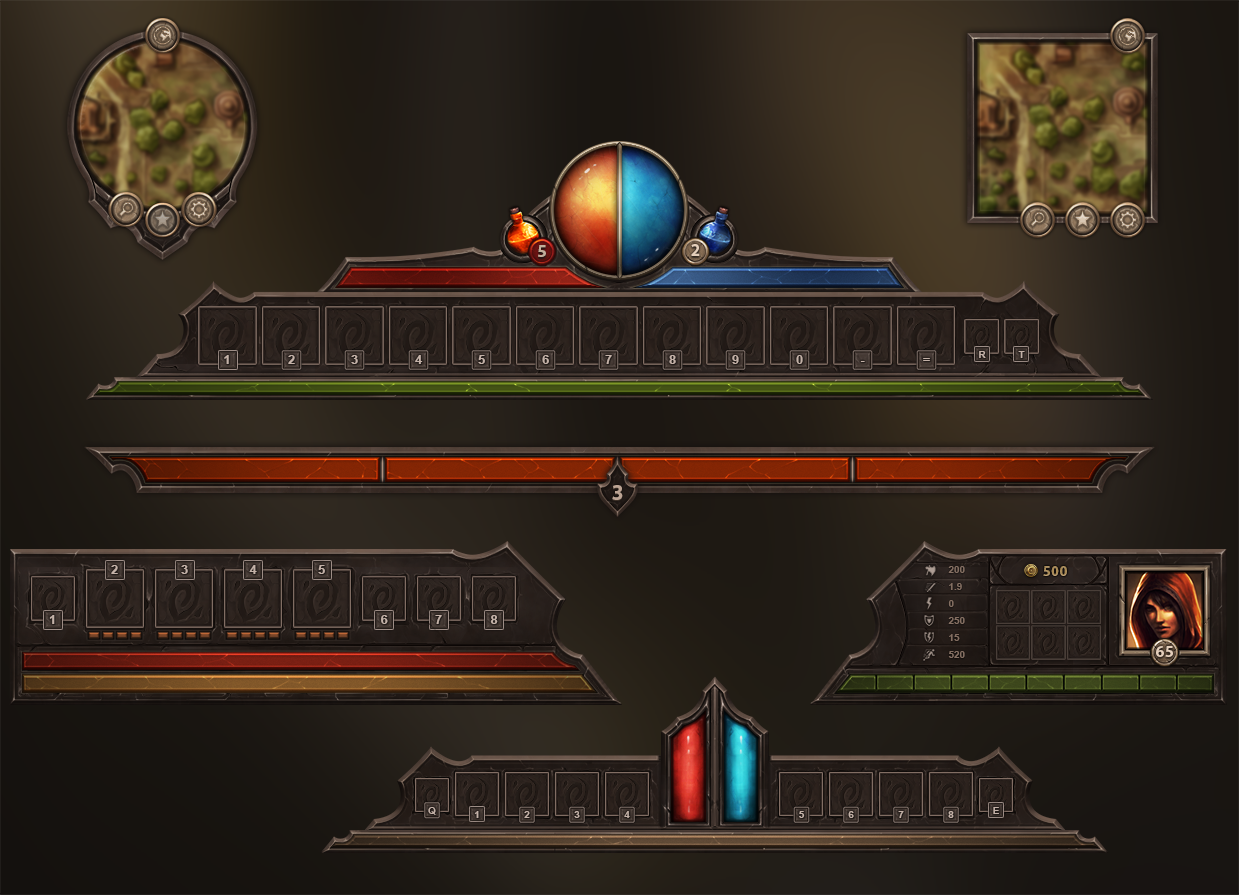
<style>
.page{position:relative;width:1239px;height:895px}
.page>*{position:absolute;margin:0}
.t1{font:17.5px "MyriadPro-Bold";color:#c2af9b}
.t2{font:17.5px "MyriadPro-Bold";color:#e4ceba}
.t3{font:9px "Arial-BoldMT";color:#c4b2a8;text-transform:uppercase;scale:1.11 1}
.t4{font:11.7px "Arial-BoldMT";color:#c4b2a8;text-transform:uppercase;scale:1.11 1}
.t5{font:22px "MyriadPro-Bold";color:#bca494}
.t6{font:9px "Arial-BoldMT";color:#846f62;text-transform:uppercase;scale:1.11 1}
.t7{font:14px "MyriadPro-Bold";letter-spacing:0.05em;color:#a88954}
.t8{font:16.5px "MyriadPro-Bold";color:#e4ceba}
.t9{font:9.3px "Arial-BoldMT";color:#c4b2a8;text-transform:uppercase;scale:1.1 1}
</style>
<div class="page">
<p class="t1" style="left:538px;top:245px;width:8px;height:12px">5</p>
<p class="t2" style="left:691px;top:244px;width:9px;height:12px">2</p>
<p class="t3" style="left:979px;top:351px;width:7px;height:7px">R</p>
<p class="t3" style="left:1018px;top:351px;width:7px;height:7px">t</p>
<p class="t4" style="left:224px;top:355px;width:5px;height:9px">1</p>
<p class="t4" style="left:288px;top:355px;width:7px;height:9px">2</p>
<p class="t4" style="left:351px;top:355px;width:7px;height:9px">3</p>
<p class="t4" style="left:415px;top:355px;width:8px;height:9px">4</p>
<p class="t4" style="left:478px;top:355px;width:7px;height:9px">5</p>
<p class="t4" style="left:542px;top:355px;width:7px;height:9px">6</p>
<p class="t4" style="left:605px;top:355px;width:7px;height:9px">7</p>
<p class="t4" style="left:669px;top:355px;width:7px;height:9px">8</p>
<p class="t4" style="left:732px;top:355px;width:7px;height:9px">9</p>
<p class="t4" style="left:796px;top:355px;width:7px;height:9px">0</p>
<p class="t4" style="left:860px;top:361px;width:5px;height:1px">-</p>
<p class="t4" style="left:923px;top:358px;width:7px;height:3px">=</p>
<p class="t5" style="left:612px;top:485px;width:11px;height:15px">3</p>
<p class="t4" style="left:111px;top:565px;width:7px;height:9px">2</p>
<p class="t4" style="left:181px;top:565px;width:7px;height:9px">3</p>
<p class="t4" style="left:249px;top:565px;width:8px;height:9px">4</p>
<p class="t4" style="left:318px;top:565px;width:7px;height:9px">5</p>
<p class="t6" style="left:948px;top:566px;width:17px;height:7px">200</p>
<p class="t7" style="left:1043px;top:566px;width:24px;height:10px">500</p>
<p class="t6" style="left:949px;top:583px;width:13px;height:7px">1.9</p>
<p class="t6" style="left:948px;top:600px;width:6px;height:7px">0</p>
<p class="t4" style="left:49px;top:615px;width:6px;height:9px">1</p>
<p class="t4" style="left:381px;top:615px;width:7px;height:9px">6</p>
<p class="t4" style="left:435px;top:615px;width:7px;height:9px">7</p>
<p class="t4" style="left:490px;top:615px;width:8px;height:9px">8</p>
<p class="t6" style="left:948px;top:617px;width:17px;height:7px">250</p>
<p class="t6" style="left:949px;top:634px;width:11px;height:7px">15</p>
<p class="t6" style="left:948px;top:651px;width:17px;height:7px">520</p>
<p class="t8" style="left:1156px;top:646px;width:17px;height:11px">65</p>
<p class="t9" style="left:428px;top:807px;width:8px;height:8px">q</p>
<p class="t9" style="left:993px;top:807px;width:6px;height:7px">e</p>
<p class="t9" style="left:474px;top:811px;width:5px;height:7px">1</p>
<p class="t9" style="left:524px;top:811px;width:6px;height:7px">2</p>
<p class="t9" style="left:574px;top:811px;width:6px;height:7px">3</p>
<p class="t9" style="left:624px;top:811px;width:6px;height:7px">4</p>
<p class="t9" style="left:799px;top:811px;width:6px;height:7px">5</p>
<p class="t9" style="left:848px;top:811px;width:6px;height:7px">6</p>
<p class="t9" style="left:898px;top:811px;width:6px;height:7px">7</p>
<p class="t9" style="left:948px;top:811px;width:6px;height:7px">8</p>
</div>
